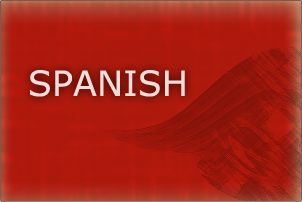
<style>
.page{position:relative;width:302px;height:202px}
.page>*{position:absolute;margin:0}
.t1{font:35px "Verdana";color:#f2dbd8}
</style>
<div class="page">
<p class="t1" style="left:30px;top:70px;width:155px;height:27px">SPANISH</p>
</div>
